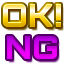
<style>
.page{position:relative;width:64px;height:64px;background:#ffffff}
.page>*{position:absolute;margin:0}
.t1{font:32px "Orbitron-Black";letter-spacing:0.01em}
.t2{font:32px "Orbitron-Black";letter-spacing:-0.025em}
</style>
<div class="page">
<p class="t1" style="left:3px;top:4px;width:58px;height:23px">OK!</p>
<p class="t2" style="left:7px;top:36px;width:50px;height:23px">NG</p>
</div>
